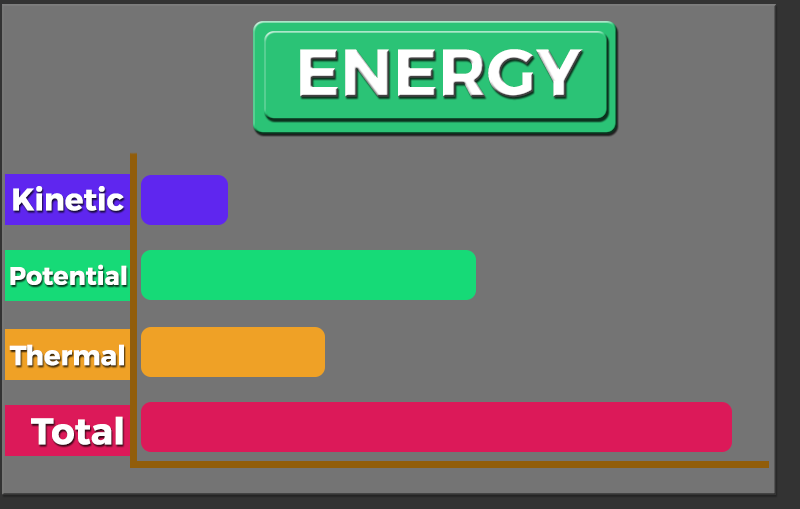
<style>
.page{position:relative;width:800px;height:509px;background:#747474}
.page>*{position:absolute;margin:0}
.t1{font:66.9px "Montserrat-Bold";color:#ffffff}
.t2{font:30.9px "Montserrat-Bold";color:#ffffff}
.t3{font:25.4px "Montserrat-Bold";color:#ffffff}
.t4{font:27.5px "Montserrat-Bold";color:#ffffff}
.t5{font:37.1px "Montserrat-Bold";color:#ffffff}
</style>
<div class="page">
<p class="t1" style="left:300px;top:49px;width:283px;height:49px">ENERGY</p>
<p class="t2" style="left:13px;top:186px;width:111px;height:25px">Kinetic</p>
<p class="t3" style="left:10px;top:264px;width:117px;height:21px">Potential</p>
<p class="t4" style="left:9px;top:344px;width:115px;height:22px">Thermal</p>
<p class="t5" style="left:31px;top:416px;width:92px;height:29px">Total</p>
</div>
